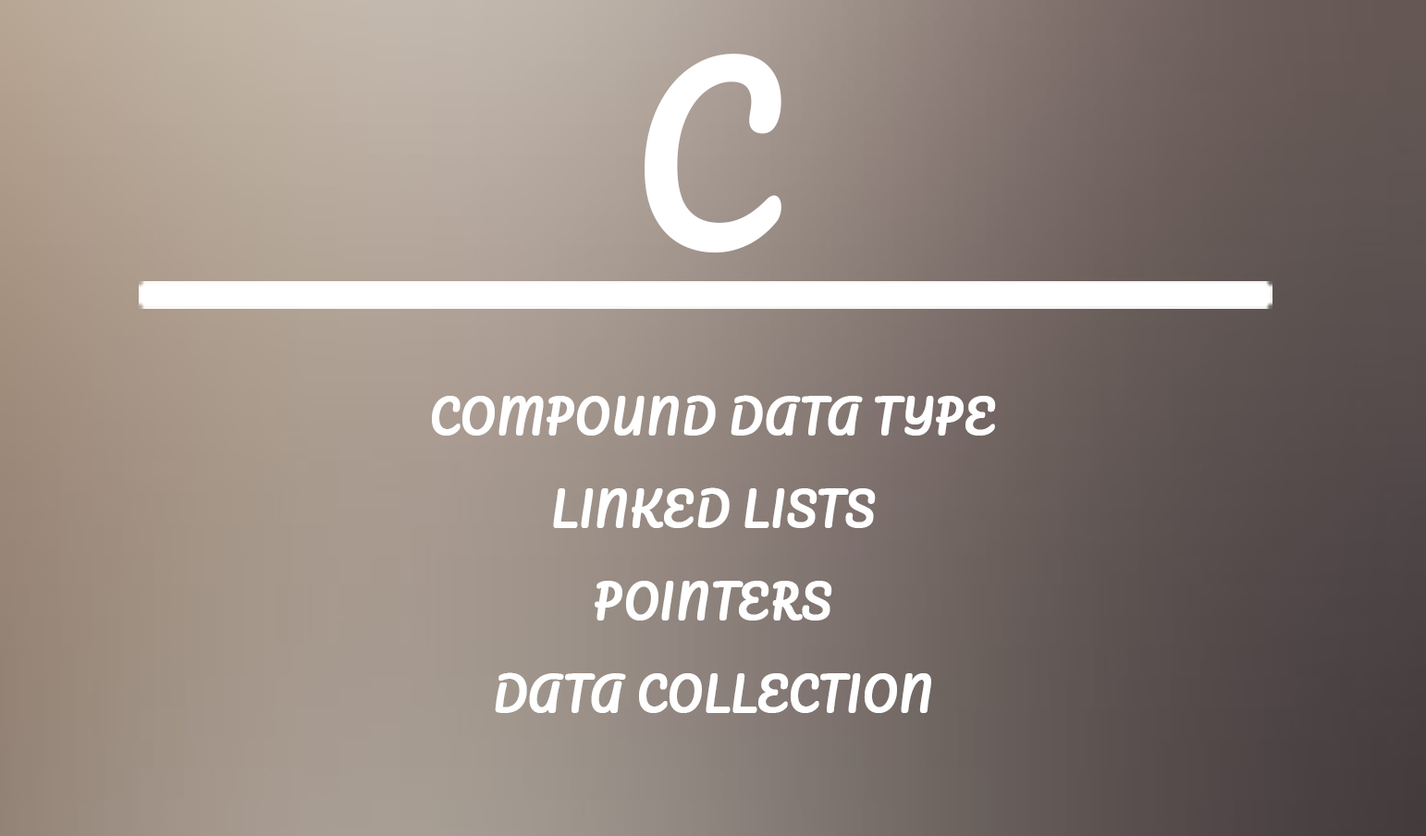
<style>
.page{position:relative;width:1426px;height:836px}
.page>*{position:absolute;margin:0}
.t1{font:231.2px "Pacifico-Regular";color:#ffffff;text-transform:uppercase;font-weight:bold;scale:0.92 1}
.t2{font:46.2px/92.5px "Pacifico-Regular";color:#ffffff;text-transform:uppercase;font-weight:bold;scale:0.92 1}
</style>
<div class="page">
<p class="t1" style="left:645px;top:54px;width:137px;height:199px">C</p>
<p class="t2" style="left:432px;top:395px;width:564px;height:318px;text-align:center">Compound Data type<br>Linked Lists<br>Pointers<br>Data collection</p>
</div>
